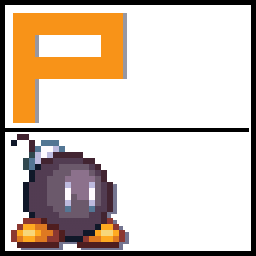
<style>
.page{position:relative;width:256px;height:256px;background:#ffffff}
.page>*{position:absolute;margin:0}
.t1{font:176px "5x5-Pixel";color:#f89318}
</style>
<div class="page">
<p class="t1" style="left:13px;top:13px;width:110px;height:110px">P</p>
<p class="t1" style="left:17px;top:13px;width:110px;height:110px">P</p>
</div>
